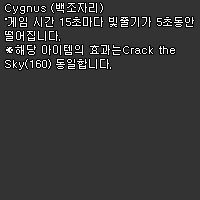
<style>
.page{position:relative;width:200px;height:200px;background:#333333}
.page>*{position:absolute;margin:0}
.t1{font:11px/14px "Dotum";color:#ffffff}
</style>
<div class="page">
<p class="t1" style="left:5px;top:3px;width:189px;height:67px">Cygnus (백조자리)<br>˚게임 시간 15초마다 빛줄기가 5초동안<br>떨어집니다.<br>※해당 아이템의 효과는Crack the <br>Sky(160) 동일합니다.</p>
</div>
